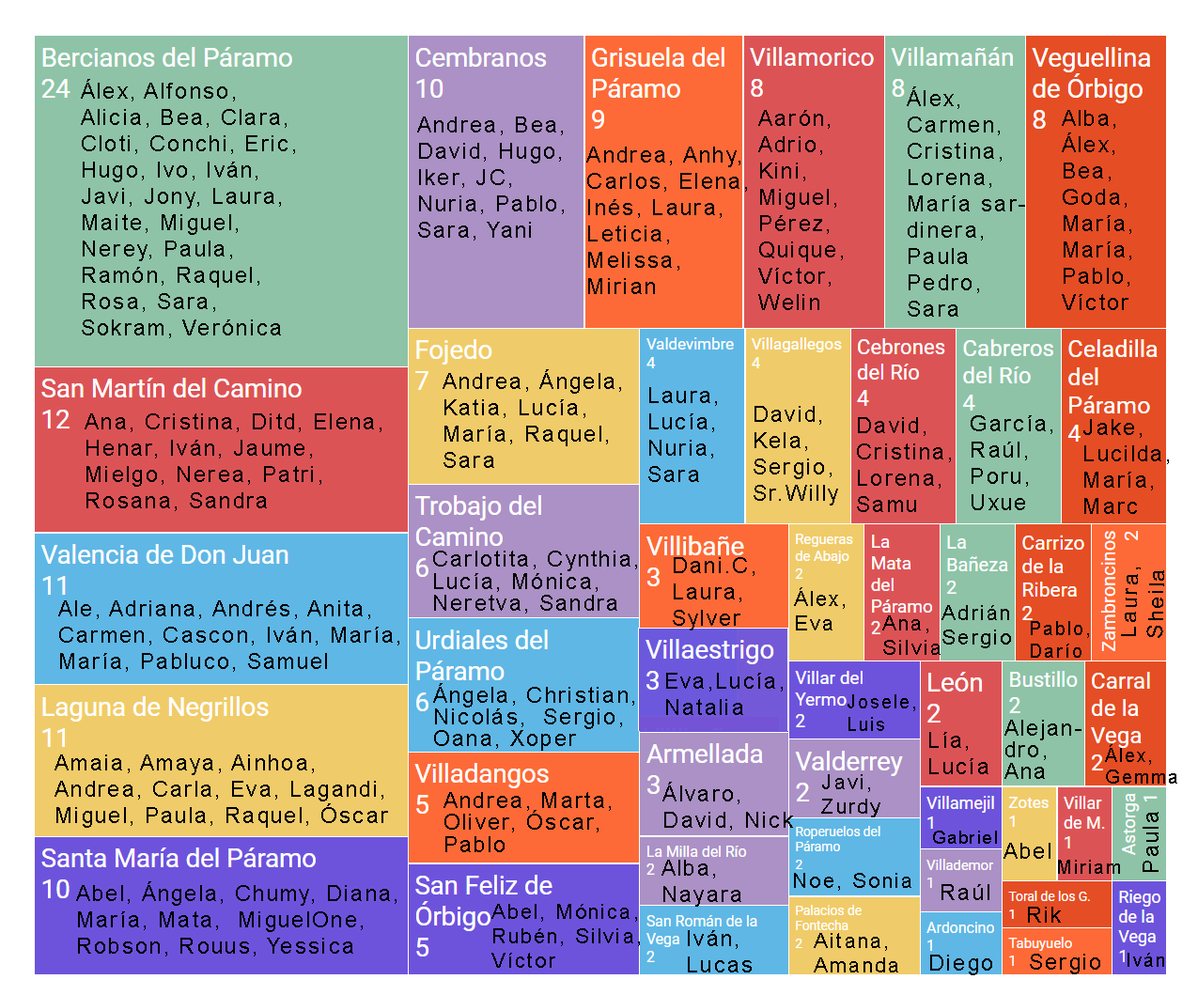
<style>
.page{position:relative;width:1198px;height:995px}
.page>*{position:absolute;margin:0}
.t1{font:21.9px "ArialMT";letter-spacing:0.1em;color:#000000}
.t2{font:21.9px/21.9px "ArialMT";letter-spacing:0.1em;color:#000000}
.t3{font:20.4px "ArialMT";letter-spacing:0.1em;color:#000000}
.t4{font:18.8px "ArialMT";letter-spacing:0.1em;color:#000000}
.t5{font:18.8px/21.9px "ArialMT";letter-spacing:0.1em;color:#000000}
.t6{font:17.4px "ArialMT";letter-spacing:0.1em;color:#000000}
</style>
<div class="page">
<p class="t1" style="left:81px;top:79px;width:214px;height:259px">Álex, Alfonso, Alicia, Bea, Clara, Cloti, Conchi, Eric, Hugo, Ivo, Iván, Javi, Jony, Laura, Maite, Miguel, Nerey, Paula, Ramón, Raquel, Rosa, Sara, Sokram, Verónica</p>
<p class="t1" style="left:907px;top:86px;width:118px;height:231px">Álex, Carmen, Cristina, Lorena, María sardinera,<br>Paula Pedro, Sara</p>
<p class="t1" style="left:758px;top:110px;width:85px;height:200px">Aarón, Adrio, Kini, Miguel, Pérez, Quique, Víctor, Welin</p>
<p class="t1" style="left:1062px;top:110px;width:69px;height:200px">Alba, Álex, <br>Bea,<br>Goda, María, María, Pablo, Víctor</p>
<p class="t1" style="left:417px;top:117px;width:147px;height:124px">Andrea, Bea, David, Hugo, Iker, JC, Nuria, Pablo, Sara, Yani</p>
<p class="t1" style="left:586px;top:147px;width:161px;height:147px">Andrea, Anhy, Carlos, Elena, Inés, Laura, Leticia,<br>Melissa, Mirian</p>
<p class="t1" style="left:443px;top:369px;width:178px;height:99px">Andrea, Ángela, Katia, Lucía, María, Raquel, Sara</p>
<p class="t1" style="left:648px;top:387px;width:69px;height:95px">Laura, Lucía, Nuria,<br>Sara</p>
<p class="t1" style="left:85px;top:413px;width:297px;height:98px">Ana, Cristina, Ditd, Elena, Henar, Iván, Jaume, Mielgo, Nerea, Patri, Rosana, Sandra</p>
<p class="t1" style="left:754px;top:406px;width:84px;height:100px">David, Kela, Sergio, Sr.Willy</p>
<p class="t1" style="left:857px;top:417px;width:94px;height:95px">David, Cristina, Lorena, Samu</p>
<p class="t1" style="left:971px;top:415px;width:82px;height:95px">García,<br>Raúl, Poru, Uxue</p>
<p class="t1" style="left:1084px;top:419px;width:85px;height:95px">Jake, Lucilda, María,<br>Marc</p>
<p class="t2" style="left:433px;top:551px;width:204px;height:63px">Carlotita, Cynthia, Lucía, Mónica, Neretva, Sandra</p>
<p class="t1" style="left:673px;top:557px;width:82px;height:74px">Dani.C, Laura,<br>Sylver</p>
<p class="t1" style="left:1121px;top:568px;width:43px;height:70px;rotate:-88deg">Laura, Sheila</p>
<p class="t3" style="left:794px;top:587px;width:51px;height:44px">Álex, Eva</p>
<p class="t1" style="left:58px;top:601px;width:341px;height:71px">Ale, Adriana, Andrés, Anita, Carmen, Cascon, Iván, María, María, Pabluco, Samuel</p>
<p class="t3" style="left:942px;top:605px;width:69px;height:43px">Adrián<br>Sergio</p>
<p class="t3" style="left:882px;top:616px;width:59px;height:39px">Ana,<br>Silvia</p>
<p class="t4" style="left:1031px;top:621px;width:58px;height:37px">Pablo,<br>Darío</p>
<p class="t1" style="left:666px;top:673px;width:117px;height:42px">Eva,Lucía,<br>Natalia</p>
<p class="t2" style="left:433px;top:683px;width:201px;height:68px">Ángela, Christian, Nicolás,  Sergio, Oana, Xoper</p>
<p class="t4" style="left:848px;top:694px;width:67px;height:37px">Josele,<br>Luis</p>
<p class="t2" style="left:1005px;top:720px;width:77px;height:59px">Alejandro,<br>Ana</p>
<p class="t1" style="left:929px;top:732px;width:60px;height:42px">Lía, Lucía</p>
<p class="t5" style="left:1105px;top:744px;width:73px;height:40px">Álex,<br>Gemma</p>
<p class="t1" style="left:55px;top:755px;width:333px;height:73px">Amaia, Amaya, Ainhoa, Andrea, Carla, Eva, Lagandi, Miguel, Paula, Raquel, Óscar</p>
<p class="t1" style="left:663px;top:782px;width:130px;height:49px">Álvaro, David, Nick</p>
<p class="t3" style="left:821px;top:774px;width:60px;height:44px">Javi, <br>Zurdy</p>
<p class="t2" style="left:444px;top:792px;width:167px;height:60px">Andrea, Marta, Oliver, Óscar, Pablo</p>
<p class="t1" style="left:1143px;top:812px;width:16px;height:60px;rotate:-90deg">Paula</p>
<p class="t6" style="left:933px;top:831px;width:64px;height:13px">Gabriel</p>
<p class="t1" style="left:1004px;top:843px;width:47px;height:16px">Abel</p>
<p class="t1" style="left:662px;top:860px;width:79px;height:47px">Alba,<br>Nayara</p>
<p class="t4" style="left:1058px;top:860px;width:62px;height:14px">Miriam</p>
<p class="t1" style="left:76px;top:881px;width:321px;height:76px">Abel, Ángela, Chumy, Diana, María, Mata,  MiguelOne, Robson, Rouus, Yessica</p>
<p class="t3" style="left:794px;top:873px;width:118px;height:18px">Noe, Sonia</p>
<p class="t1" style="left:942px;top:884px;width:48px;height:16px">Raúl</p>
<p class="t3" style="left:491px;top:904px;width:149px;height:64px">Abel, Mónica, Rubén, Silvia, Víctor</p>
<p class="t1" style="left:1028px;top:907px;width:33px;height:16px">Rik</p>
<p class="t1" style="left:688px;top:930px;width:64px;height:43px">Iván, Lucas</p>
<p class="t3" style="left:814px;top:933px;width:84px;height:40px">Aitana, Amanda</p>
<p class="t1" style="left:1030px;top:954px;width:70px;height:21px">Sergio</p>
<p class="t4" style="left:1128px;top:953px;width:36px;height:14px">Iván</p>
<p class="t1" style="left:930px;top:955px;width:62px;height:20px">Diego</p>
</div>
